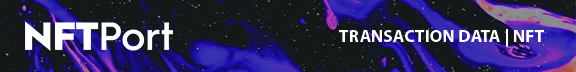
<style>
.page{position:relative;width:576px;height:72px}
.page>*{position:absolute;margin:0}
.t1{font:17.8px "MyriadPro-Bold";color:#ffffff}
</style>
<div class="page">
<p class="t1" style="left:339px;top:29px;width:205px;height:18px">TRANSACTION DATA | NFT</p>
</div>
